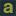
<style>
.page{position:relative;width:16px;height:16px;background:#1d2b33}
.page>*{position:absolute;margin:0}
.t1{font:19.2px "Coolvetica";color:#989d44}
</style>
<div class="page">
<p class="t1" style="left:3px;top:3px;width:10px;height:10px">a</p>
</div>
